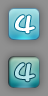
<style>
.page{position:relative;width:48px;height:96px}
.page>*{position:absolute;margin:0}
.t1{font:24px "DFMaruMoji-W9-WING-RKSJ-H";color:#ffffff;font-weight:bold}
.t2{font:24px "DFMaruMoji-W9-WING-RKSJ-H";color:#b5e3e9;font-weight:bold}
</style>
<div class="page">
<p class="t1" style="left:15px;top:15px;width:20px;height:19px">4</p>
<p class="t2" style="left:15px;top:63px;width:20px;height:19px">4</p>
</div>
